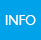
<style>
.page{position:relative;width:41px;height:40px;background:#00a2e9}
.page>*{position:absolute;margin:0}
.t1{font:13.9px "Humanist521BT-Roman";color:#ffffff;scale:0.95 1}
</style>
<div class="page">
<p class="t1" style="left:5px;top:15px;width:31px;height:10px">INFO</p>
</div>
